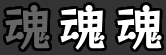
<style>
.page{position:relative;width:166px;height:55px;background:#333333}
.page>*{position:absolute;margin:0}
.t1{font:49px "RocknRollOne-Regular";color:#666666}
.t2{font:49px "RocknRollOne-Regular";color:#ffffff}
</style>
<div class="page">
<p class="t1" style="left:5px;top:4px;width:45px;height:46px">魂</p>
<p class="t2" style="left:60px;top:4px;width:45px;height:46px">魂</p>
<p class="t2" style="left:117px;top:4px;width:45px;height:46px">魂</p>
</div>
